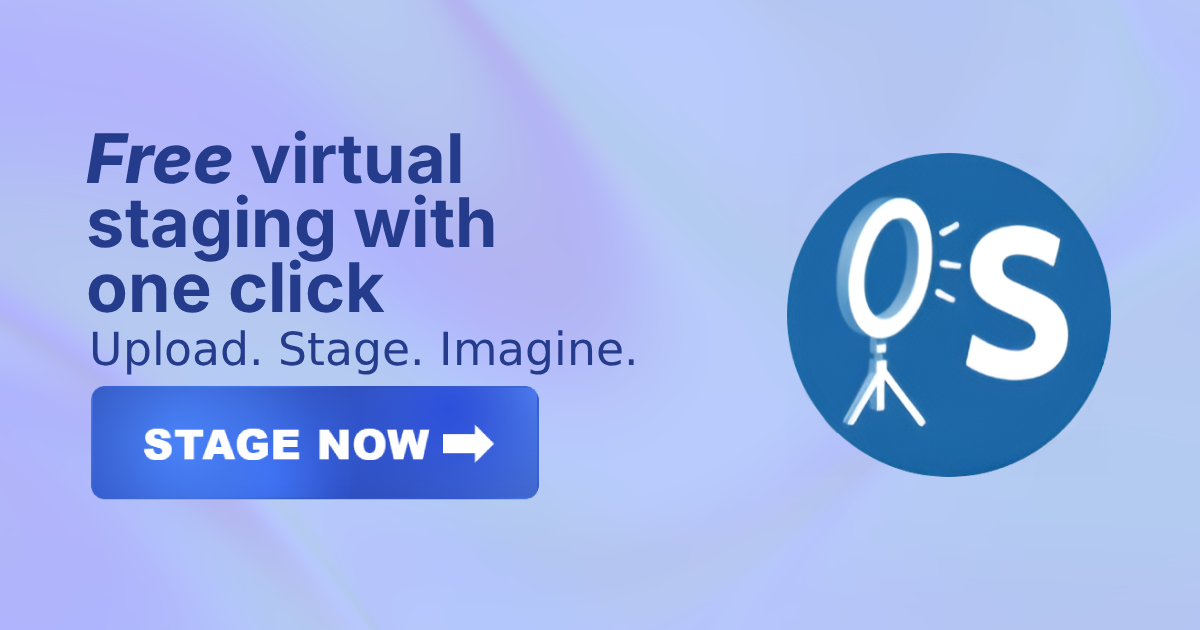
<style>
.page{position:relative;width:1200px;height:630px}
.page>*{position:absolute;margin:0}
.t1{font:68.4px/64.4px "Inter-Bold";color:#253b8c}
.t2{font:68.4px/64.4px "Inter-ExtraBoldItalic";color:#253b8c}
.t3{font:45.7px "DejaVuSans";color:#253b8c}
</style>
<div class="page">
<p class="t1" style="left:86px;top:130px;width:408px;height:183px"><span class="t2">Free </span>virtual<br>staging with <br>one click</p>
<p class="t3" style="left:92px;top:330px;width:542px;height:45px">Upload. Stage. Imagine.</p>
</div>
